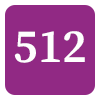
<style>
.page{position:relative;width:100px;height:100px;background:#912984}
.page>*{position:absolute;margin:0}
.t1{font:47.3px "SourceSerifRoman-Semibold";color:#fefefe}
</style>
<div class="page">
<p class="t1" style="left:14px;top:31px;width:71px;height:32px">512</p>
</div>
